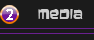
<style>
.page{position:relative;width:94px;height:40px;background:#1b1b1b}
.page>*{position:absolute;margin:0}
.t1{font:12px "Baveuse";color:#cccccc}
</style>
<div class="page">
<p class="t1" style="left:38px;top:9px;width:45px;height:10px">Media</p>
</div>
